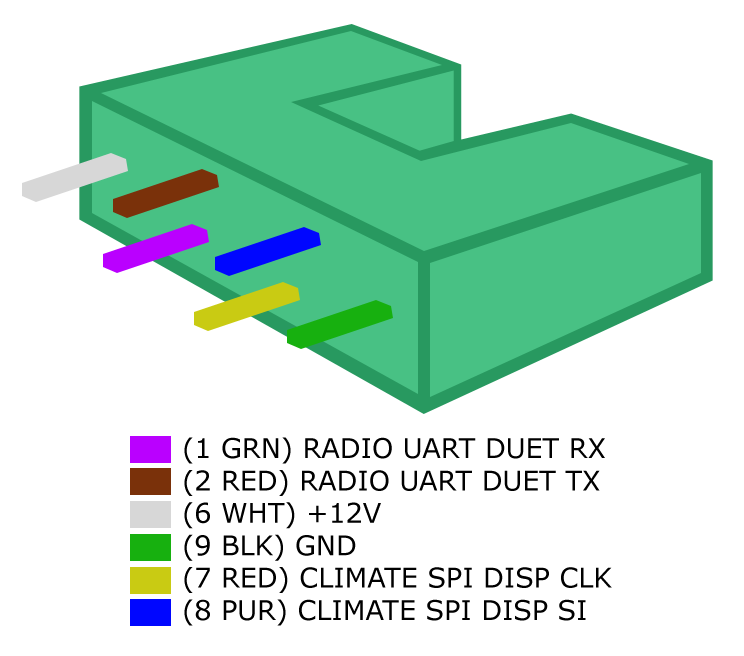
<style>
.page{position:relative;width:744px;height:656px;background:#ffffff}
.page>*{position:absolute;margin:0}
.t1{font:27px "Verdana";color:#000000}
</style>
<div class="page">
<p class="t1" style="left:184px;top:437px;width:428px;height:189px">(1 GRN) RADIO UART DUET RX<br>(2 RED) RADIO UART DUET TX<br>(6 WHT) +12V<br>(9 BLK) GND<br>(7 RED) CLIMATE SPI DISP CLK<br>(8 PUR) CLIMATE SPI DISP SI</p>
</div>
